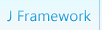
<style>
.page{position:relative;width:102px;height:30px}
.page>*{position:absolute;margin:0}
.t1{font:14px "MicrosoftYaHei"}
</style>
<div class="page">
<p class="t1" style="left:7px;top:9px;width:84px;height:13px">J Framework</p>
</div>
